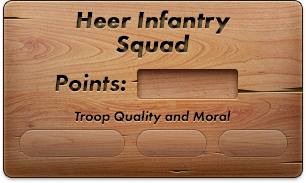
<style>
.page{position:relative;width:306px;height:183px}
.page>*{position:absolute;margin:0}
.t1{font:24px/24px "FuturaPT-HeavyObl";font-weight:bold}
.t2{font:24px "FuturaPT-HeavyObl"}
.t3{font:14px "FuturaPT-HeavyObl";color:#000000}
</style>
<div class="page">
<p class="t1" style="left:76px;top:10px;width:155px;height:48px;text-align:center">Heer Infantry<br>Squad</p>
<p class="t2" style="left:55px;top:73px;width:71px;height:19px">Points:</p>
<p class="t3" style="left:74px;top:110px;width:157px;height:15px">Troop Quality and Moral</p>
</div>
